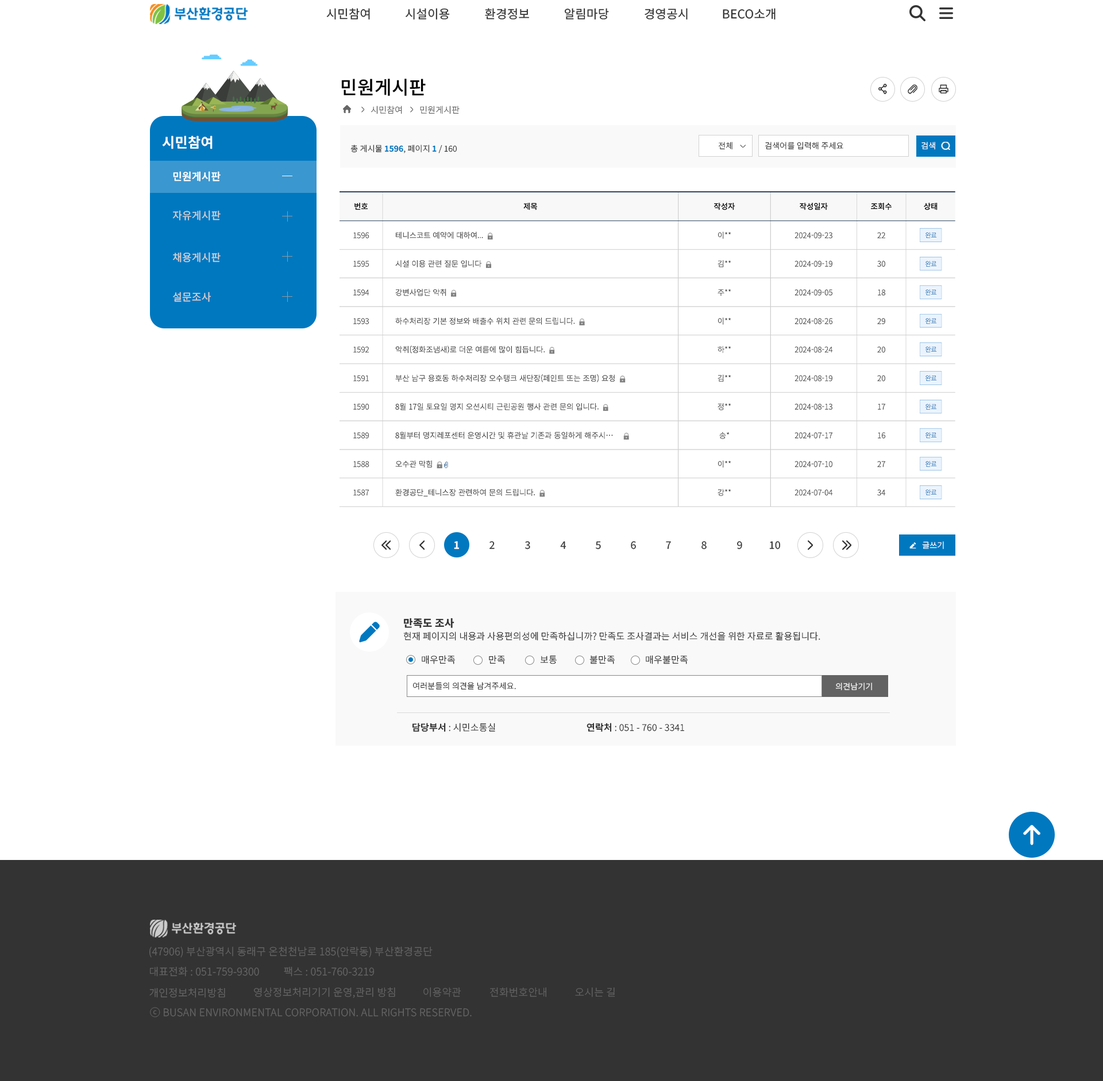
<style>
.page{position:relative;width:1103px;height:1081px;background:#ffffff}
.page>*{position:absolute;margin:0}
.t1{font:12.1px "NotoSansKR-Regular";letter-spacing:0.015em;color:#333333}
.t2{font:18.4px "NotoSansKR-Medium";letter-spacing:0.015em;color:#000000}
.t3{font:8.6px "NotoSansKR-Light";letter-spacing:0.015em;color:#666666}
.t4{font:13.8px "NotoSansKR-SemiBold";letter-spacing:0.015em;color:#ffffff}
.t5{font:8px "NotoSansKR-Light";letter-spacing:0.015em;color:#333333}
.t6{font:8px "NotoSansKR-SemiBold";letter-spacing:0.015em;color:#0078c0}
.t7{font:8px "NotoSansKR-Light";letter-spacing:0.015em;color:#ffffff}
.t8{font:10.3px "NotoSansKR-Medium";letter-spacing:0.015em;color:#ffffff}
.t9{font:10.3px "NotoSansKR-Regular";letter-spacing:0.015em;color:#d1d1d1}
.t10{font:10.3px "NotoSansKR-SemiBold";letter-spacing:0.015em;color:#ffffff}
.t11{font:10.3px "NotoSansKR-Regular";letter-spacing:0.015em;color:#333333}
.t12{font:10.3px "NotoSansKR-Bold";letter-spacing:0.015em;color:#333333}
.t13{font:9.2px "NotoSansKR-Light";letter-spacing:0.015em;color:#333333}
.t14{font:9.2px "NotoSansKR-Medium";letter-spacing:0.015em;color:#333333}
.t15{font:10.3px "NotoSansKR-Light";letter-spacing:0.015em;color:#666666}
.t16{font:10.3px "NotoSansKR-Light";letter-spacing:0.015em;color:#636363}
</style>
<div class="page">
<p class="t1" style="left:326px;top:8px;width:44px;height:12px">시민참여</p>
<p class="t1" style="left:405px;top:8px;width:45px;height:12px">시설이용</p>
<p class="t1" style="left:485px;top:8px;width:44px;height:12px">환경정보</p>
<p class="t1" style="left:565px;top:8px;width:44px;height:12px">알림마당</p>
<p class="t1" style="left:644px;top:8px;width:43px;height:12px">경영공시</p>
<p class="t1" style="left:722px;top:8px;width:53px;height:12px">BECO소개</p>
<p class="t2" style="left:341px;top:79px;width:85px;height:17px">민원게시판</p>
<p class="t3" style="left:370px;top:106px;width:32px;height:8px">시민참여</p>
<p class="t3" style="left:420px;top:106px;width:39px;height:8px">민원게시판</p>
<p class="t4" style="left:162px;top:136px;width:50px;height:13px">시민참여</p>
<p class="t5" style="left:350px;top:145px;width:107px;height:8px">총 게시물 <span class="t6">1596</span>, 페이지 <span class="t6">1</span> / 160</p>
<p class="t5" style="left:718px;top:142px;width:14px;height:8px">전체</p>
<p class="t5" style="left:765px;top:142px;width:78px;height:8px">검색어를 입력해 주세요</p>
<p class="t7" style="left:921px;top:142px;width:14px;height:8px">검색</p>
<p class="t8" style="left:173px;top:171px;width:48px;height:10px">민원게시판</p>
<p class="t9" style="left:172px;top:210px;width:49px;height:11px">자유게시판</p>
<p class="t9" style="left:173px;top:252px;width:48px;height:10px">채용게시판</p>
<p class="t9" style="left:173px;top:292px;width:38px;height:10px">설문조사</p>
<p class="t10" style="left:454px;top:541px;width:5px;height:9px">1</p>
<p class="t11" style="left:489px;top:541px;width:5px;height:9px">2</p>
<p class="t11" style="left:525px;top:541px;width:5px;height:9px">3</p>
<p class="t11" style="left:560px;top:542px;width:6px;height:8px">4</p>
<p class="t11" style="left:596px;top:542px;width:5px;height:8px">5</p>
<p class="t11" style="left:631px;top:541px;width:5px;height:9px">6</p>
<p class="t11" style="left:666px;top:542px;width:5px;height:8px">7</p>
<p class="t11" style="left:701px;top:541px;width:5px;height:9px">8</p>
<p class="t11" style="left:737px;top:541px;width:5px;height:9px">9</p>
<p class="t11" style="left:769px;top:541px;width:11px;height:9px">10</p>
<p class="t7" style="left:922px;top:542px;width:22px;height:8px">글쓰기</p>
<p class="t12" style="left:404px;top:618px;width:50px;height:10px">만족도 조사</p>
<p class="t13" style="left:403px;top:632px;width:417px;height:9px">현재 페이지의 내용과 사용편의성에 만족하십니까? 만족도 조사결과는 서비스 개선을 위한 자료로 활용됩니다.</p>
<p class="t13" style="left:422px;top:655px;width:33px;height:9px">매우만족</p>
<p class="t13" style="left:489px;top:655px;width:16px;height:9px">만족</p>
<p class="t13" style="left:540px;top:656px;width:16px;height:8px">보통</p>
<p class="t13" style="left:589px;top:655px;width:26px;height:9px">불만족</p>
<p class="t13" style="left:646px;top:655px;width:41px;height:9px">매우불만족</p>
<p class="t5" style="left:413px;top:682px;width:103px;height:8px">여러분들의 의견을 남겨주세요.</p>
<p class="t7" style="left:835px;top:683px;width:37px;height:8px">의견남기기</p>
<p class="t13" style="left:412px;top:723px;width:83px;height:9px"><span class="t14">담당부서</span> : 시민소통실</p>
<p class="t13" style="left:586px;top:723px;width:98px;height:9px"><span class="t14">연락처</span> : 051 - 760 - 3341</p>
<p class="t15" style="left:149px;top:947px;width:283px;height:11px">(47906) 부산광역시 동래구 온천천남로 185(안락동) 부산환경공단</p>
<p class="t15" style="left:150px;top:967px;width:109px;height:10px">대표전화 : 051-759-9300</p>
<p class="t15" style="left:284px;top:967px;width:90px;height:10px">팩스 : 051-760-3219</p>
<p class="t15" style="left:149px;top:988px;width:76px;height:10px">개인정보처리방침</p>
<p class="t15" style="left:254px;top:987px;width:141px;height:12px">영상정보처리기기 운영,관리 방침</p>
<p class="t16" style="left:423px;top:988px;width:38px;height:10px">이용약관</p>
<p class="t16" style="left:490px;top:988px;width:56px;height:10px">전화번호안내</p>
<p class="t16" style="left:575px;top:988px;width:40px;height:10px">오시는 길</p>
<p class="t15" style="left:150px;top:1007px;width:322px;height:11px">ⓒ BUSAN ENVIRONMENTAL CORPORATION. ALL RIGHTS RESERVED.</p>
</div>
